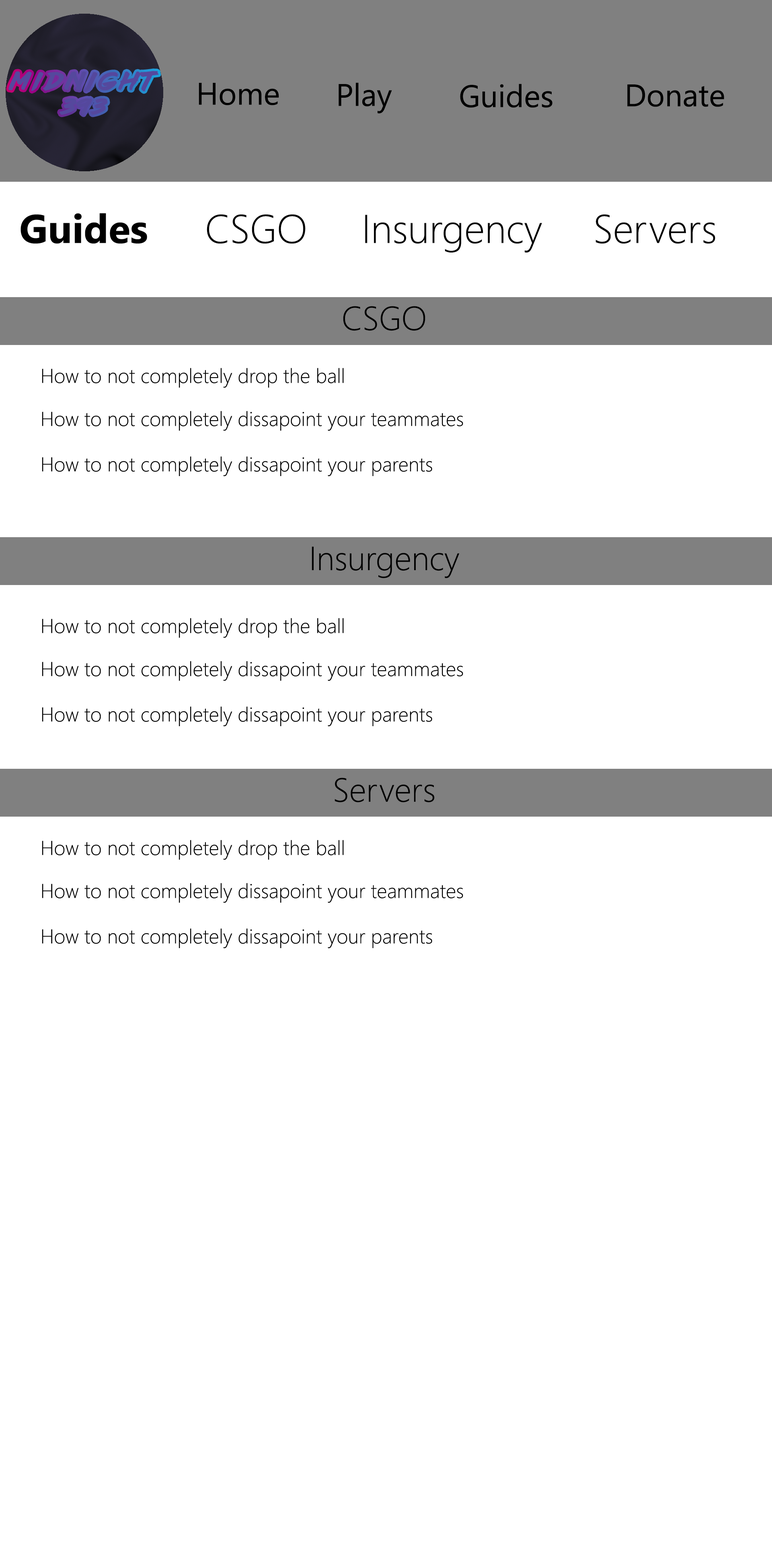
<style>
.page{position:relative;width:772px;height:1544px;background:#ffffff}
.page>*{position:absolute;margin:0}
.t1{font:22.3px "lazer84";letter-spacing:0.2em;color:#55489d}
.t2{font:31.3px "SegoeUI";color:#000000}
.t3{font:40.2px "SegoeUI-Bold";color:#000000}
.t4{font:40.2px "SegoeUI-Light";color:#000000}
.t5{font:33.5px "SegoeUI-Light";color:#000000}
.t6{font:20.1px "SegoeUI-Light";color:#000000}
</style>
<div class="page">
<p class="t1" style="left:8px;top:71px;width:151px;height:44px;text-align:center">Midnight<br>393</p>
<p class="t2" style="left:199px;top:83px;width:80px;height:22px">Home</p>
<p class="t2" style="left:339px;top:82px;width:53px;height:31px">Play</p>
<p class="t2" style="left:460px;top:84px;width:93px;height:24px">Guides</p>
<p class="t2" style="left:627px;top:84px;width:97px;height:23px">Donate</p>
<p class="t3" style="left:21px;top:213px;width:126px;height:31px">Guides</p>
<p class="t4" style="left:207px;top:214px;width:99px;height:30px">CSGO</p>
<p class="t4" style="left:365px;top:215px;width:177px;height:38px">Insurgency</p>
<p class="t4" style="left:596px;top:214px;width:119px;height:30px">Servers</p>
<p class="t5" style="left:343px;top:306px;width:82px;height:25px">CSGO</p>
<p class="t6" style="left:42px;top:368px;width:302px;height:20px">How to not completely drop the ball</p>
<p class="t6" style="left:42px;top:411px;width:421px;height:20px">How to not completely dissapoint your teammates</p>
<p class="t6" style="left:42px;top:456px;width:390px;height:21px">How to not completely dissapoint your parents</p>
<p class="t5" style="left:312px;top:547px;width:148px;height:31px">Insurgency</p>
<p class="t6" style="left:42px;top:618px;width:302px;height:20px">How to not completely drop the ball</p>
<p class="t6" style="left:42px;top:661px;width:421px;height:20px">How to not completely dissapoint your teammates</p>
<p class="t6" style="left:42px;top:707px;width:390px;height:20px">How to not completely dissapoint your parents</p>
<p class="t5" style="left:335px;top:778px;width:100px;height:25px">Servers</p>
<p class="t6" style="left:42px;top:840px;width:302px;height:20px">How to not completely drop the ball</p>
<p class="t6" style="left:42px;top:883px;width:421px;height:20px">How to not completely dissapoint your teammates</p>
<p class="t6" style="left:42px;top:929px;width:390px;height:20px">How to not completely dissapoint your parents</p>
</div>
